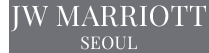
<style>
.page{position:relative;width:209px;height:53px;background:#707176}
.page>*{position:absolute;margin:0}
.t1{font:28.5px "PlayfairDisplay-Regular";letter-spacing:0.025em;color:#ffffff}
.t2{font:17.4px "PlayfairDisplay-Regular";letter-spacing:0.025em;color:#ffffff}
</style>
<div class="page">
<p class="t1" style="left:11px;top:5px;width:195px;height:27px">JW MARRIOTT</p>
<p class="t2" style="left:81px;top:36px;width:56px;height:14px">SEOUL</p>
</div>
